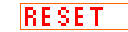
<style>
.page{position:relative;width:128px;height:32px;background:#ffffff}
.page>*{position:absolute;margin:0}
.t1{font:43px "Thintel";letter-spacing:0.1em;color:#ff0000}
</style>
<div class="page">
<p class="t1" style="left:25px;top:7px;width:78px;height:19px">RESET</p>
</div>
